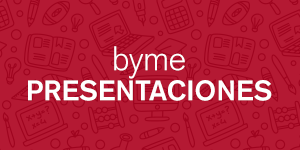
<style>
.page{position:relative;width:300px;height:150px;background:#b41933}
.page>*{position:absolute;margin:0}
.t1{font:28px/30px "AkzidenzGroteskBQ-Medium";color:#ffffff}
.t2{font:34px/35px "AkzidenzGroteskBQ-Light";letter-spacing:-0.02em;color:#ffffff}
</style>
<div class="page">
<p class="t1" style="left:28px;top:46px;width:244px;height:55px;text-align:center"><span class="t2">byme<br></span>PRESENTACIONES</p>
</div>
